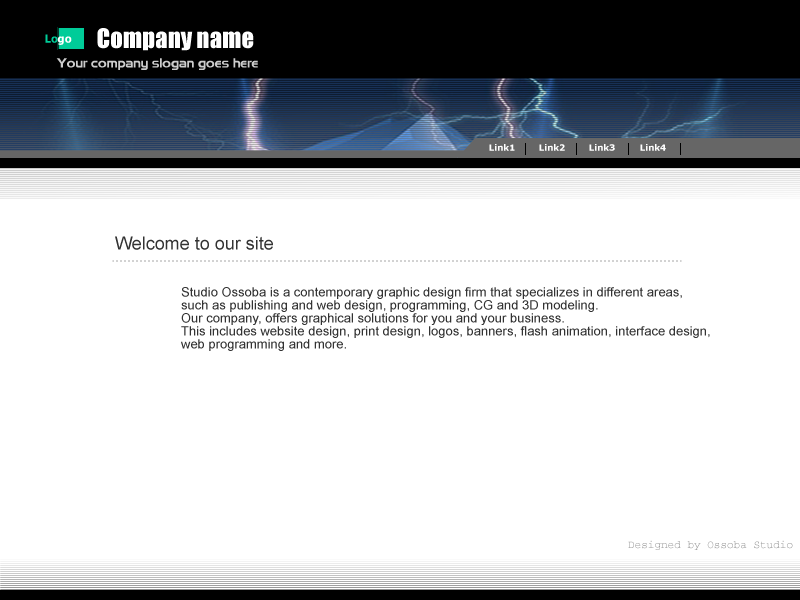
<style>
.page{position:relative;width:800px;height:600px;background:#ffffff}
.page>*{position:absolute;margin:0}
.t1{font:25px "Impact";color:#ffffff}
.t2{font:13px "Niamey";color:#cccccc}
.t3{font:8.6px "Verdana-Bold";color:#ffffff}
.t4{font:18px "ArialMT";color:#333333}
.t5{font:13px/13px "ArialMT";color:#333333}
.t6{font:11px "Courier";color:#9a9a9a}
</style>
<div class="page">
<p class="t1" style="left:97px;top:28px;width:157px;height:23px">Company name</p>
<p class="t2" style="left:56px;top:58px;width:202px;height:12px">Your company slogan goes here</p>
<p class="t3" style="left:489px;top:144px;width:26px;height:7px">Link1</p>
<p class="t3" style="left:539px;top:144px;width:26px;height:7px">Link2</p>
<p class="t3" style="left:589px;top:144px;width:26px;height:7px">Link3</p>
<p class="t3" style="left:640px;top:144px;width:26px;height:7px">Link4</p>
<p class="t4" style="left:115px;top:236px;width:158px;height:14px">Welcome to our site</p>
<p class="t5" style="left:181px;top:287px;width:529px;height:64px">Studio Ossoba is a contemporary graphic design firm that specializes in different areas,<br>such as publishing and web design, programming, CG and 3D modeling. <br>Our company, offers graphical solutions for you and your business. <br>This includes website design, print design, logos, banners, flash animation, interface design, <br>web programming and more.</p>
<p class="t6" style="left:628px;top:540px;width:165px;height:10px">Designed by Ossoba Studio</p>
</div>
